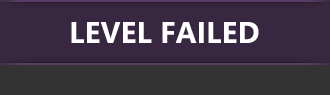
<style>
.page{position:relative;width:330px;height:95px;background:#372740}
.page>*{position:absolute;margin:0}
.t1{font:30px "SegoeWP-Bold";color:#ffffff}
</style>
<div class="page">
<p class="t1" style="left:71px;top:22px;width:188px;height:21px">LEVEL FAILED</p>
</div>
